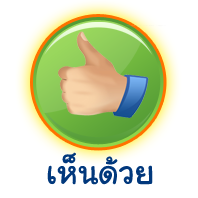
<style>
.page{position:relative;width:198px;height:198px;background:#ffffff}
.page>*{position:absolute;margin:0}
.t1{font:48px "LayijiMaHaNiYomV1.2";color:#01387c}
</style>
<div class="page">
<p class="t1" style="left:47px;top:152px;width:106px;height:33px">เห็นด้วย</p>
</div>
